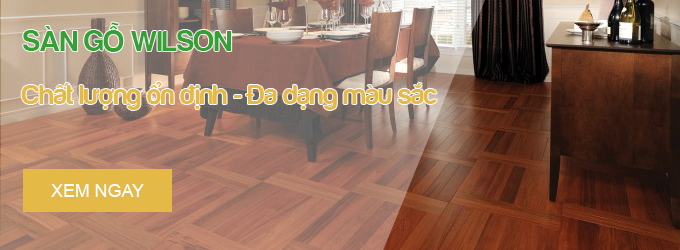
<style>
.page{position:relative;width:680px;height:250px}
.page>*{position:absolute;margin:0}
.t1{font:30px "FS-Harabara";color:#35a135}
.t2{font:28px "FS-Harabara";color:#e5b946}
.t3{font:17.8px "ArialMT";color:#ffffff}
</style>
<div class="page">
<p class="t1" style="left:23px;top:22px;width:209px;height:30px">SÀN GỖ WILSON</p>
<p class="t2" style="left:21px;top:82px;width:416px;height:28px">Chất lượng ổn định - Đa dạng màu sắc</p>
<p class="t3" style="left:51px;top:184px;width:93px;height:13px">XEM NGAY</p>
</div>
